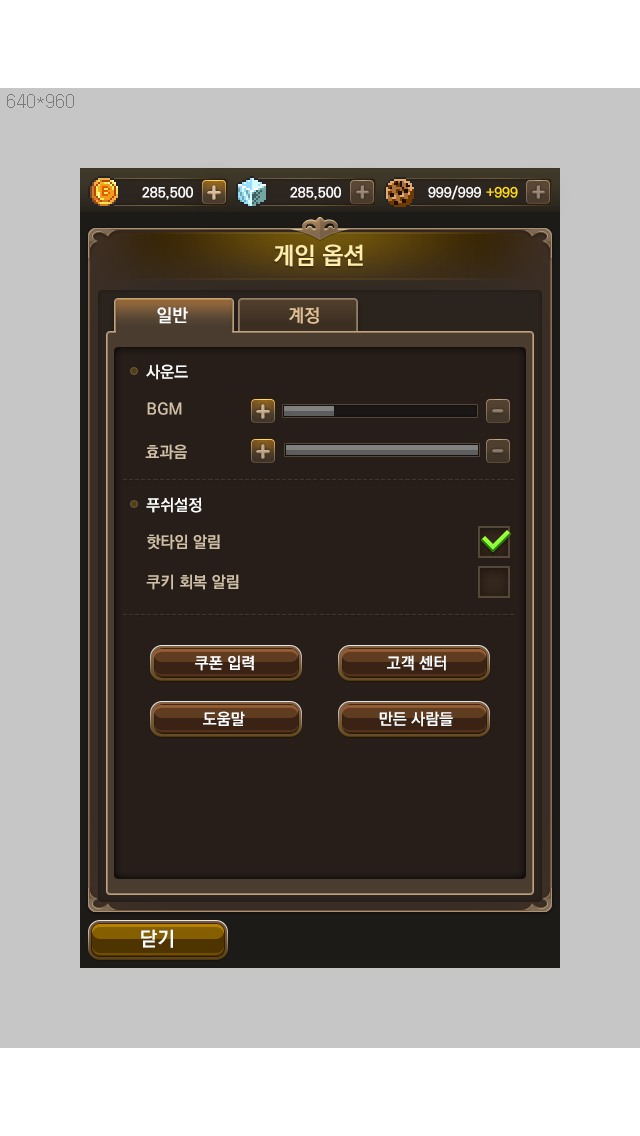
<style>
.page{position:relative;width:640px;height:1136px;background:#c6c6c6}
.page>*{position:absolute;margin:0}
.t1{font:24px "KoPubDotumBold";color:#ffedab}
.t2{font:18px "KoPubDotumBold";color:#ffffff}
.t3{font:18px "KoPubDotumBold";color:#e0c093}
.t4{font:16px "KoPubDotumBold";color:#ffffff}
.t5{font:16px "KoPubDotumBold";color:#d0c0a6}
.t6{font:30px "BMJUA";color:#d8bd9f}
.t7{font:28px "BMJUA";color:#988672}
.t8{font:30px "BMJUA";color:#bfa78c}
.t9{font:20px "KoPubDotumBold";color:#ffffff}
</style>
<div class="page">
<p class="t1" style="left:274px;top:244px;width:89px;height:23px">게임 옵션</p>
<p class="t2" style="left:157px;top:307px;width:31px;height:17px">일반</p>
<p class="t3" style="left:289px;top:307px;width:30px;height:17px">계정</p>
<p class="t4" style="left:146px;top:364px;width:42px;height:16px">사운드</p>
<p class="t5" style="left:147px;top:402px;width:35px;height:13px">BGM</p>
<p class="t6" style="left:256px;top:404px;width:14px;height:15px">+</p>
<p class="t7" style="left:492px;top:409px;width:12px;height:4px">-</p>
<p class="t5" style="left:145px;top:444px;width:42px;height:16px">효과음</p>
<p class="t8" style="left:256px;top:444px;width:14px;height:15px">+</p>
<p class="t7" style="left:492px;top:449px;width:12px;height:4px">-</p>
<p class="t4" style="left:146px;top:497px;width:56px;height:16px">푸쉬설정</p>
<p class="t5" style="left:147px;top:534px;width:73px;height:16px">핫타임 알림</p>
<p class="t5" style="left:146px;top:574px;width:93px;height:16px">쿠키 회복 알림</p>
<p class="t4" style="left:195px;top:655px;width:59px;height:16px">쿠폰 입력</p>
<p class="t4" style="left:387px;top:655px;width:59px;height:16px">고객 센터</p>
<p class="t4" style="left:203px;top:711px;width:42px;height:15px">도움말</p>
<p class="t4" style="left:379px;top:711px;width:74px;height:16px">만든 사람들</p>
<p class="t9" style="left:141px;top:929px;width:32px;height:19px">닫기</p>
</div>
